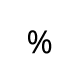
<style>
.page{position:relative;width:80px;height:80px;background:#ffffff}
.page>*{position:absolute;margin:0}
.t1{font:31.8px "DroidSans";color:#000000}
</style>
<div class="page">
<p class="t1" style="left:28px;top:30px;width:24px;height:24px">%</p>
</div>
